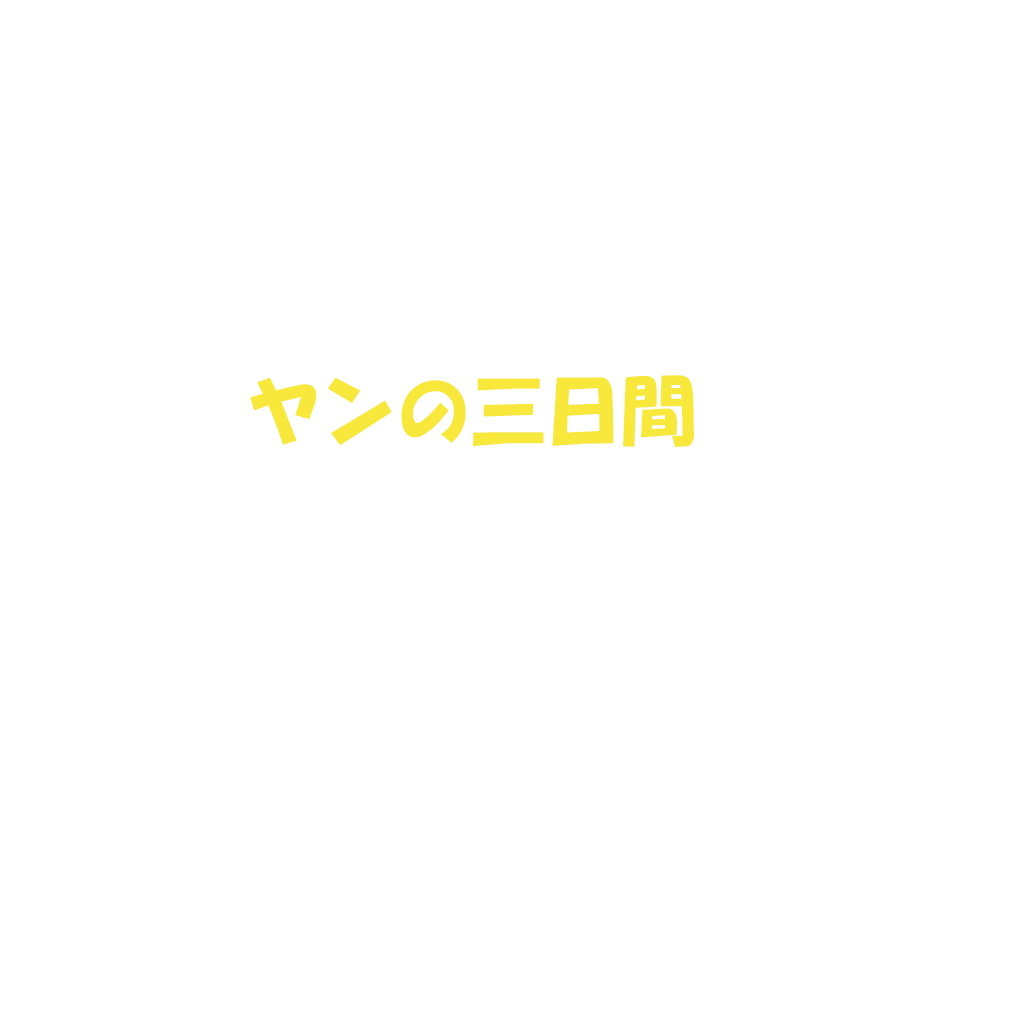
<style>
.page{position:relative;width:1024px;height:1024px;background:#ffffff}
.page>*{position:absolute;margin:0}
.t1{font:75px "HGSSoeiKakupoptai";color:#f8e83b}
</style>
<div class="page">
<p class="t1" style="left:250px;top:375px;width:444px;height:72px">ヤンの三日間</p>
</div>
